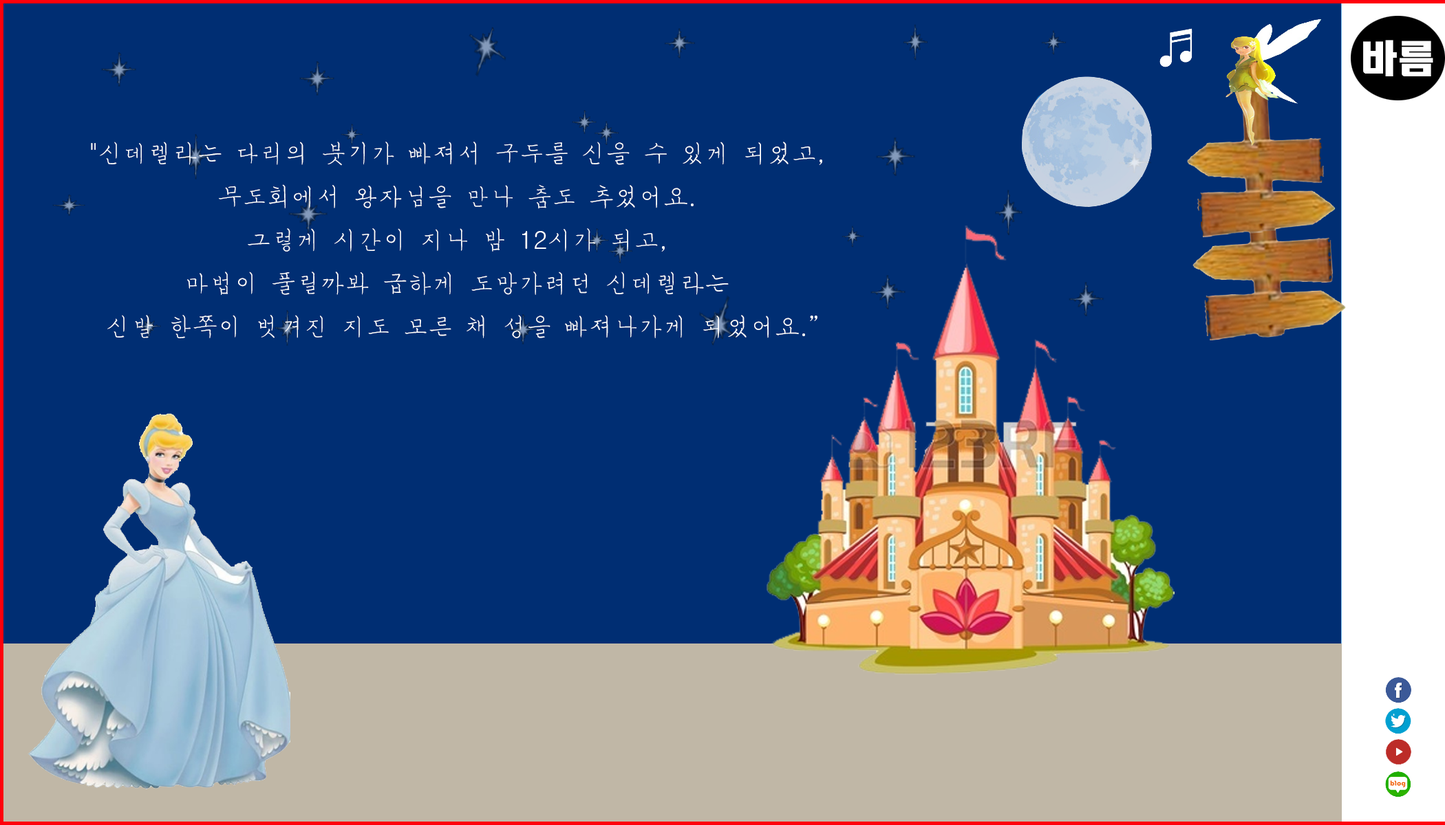
<style>
.page{position:relative;width:1445px;height:825px;background:#002e73}
.page>*{position:absolute;margin:0}
.t1{font:24.8px "MSugiJeong";color:#ffffff}
.t2{font:24.8px "Gulim";color:#ffffff}
</style>
<div class="page">
<p class="t1" style="left:91px;top:142px;width:731px;height:196px;text-align:center"><span class="t2">"</span>신데렐라는 다리의 붓기가 빠져서 구두를 신을 수 있게 되었고<span class="t2">,</span> <br>무도회에서 왕자님을 만나 춤도 추었어요<span class="t2">.</span> <br>그렇게 시간이 지나 밤 <span class="t2">12</span>시가 되고<span class="t2">,</span> <br>마법이 풀릴까봐 급하게 도망가려던 신데렐라는 <br>신발 한쪽이 벗겨진 지도 모른 채 성을 빠져나가게 되었어요<span class="t2">.”</span></p>
</div>
